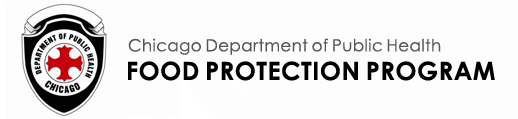
<style>
.page{position:relative;width:518px;height:119px;background:#fdfdfd}
.page>*{position:absolute;margin:0}
.t1{font:16.7px "CenturyGothic";letter-spacing:-0.06em;color:#565656}
.t2{font:25px "CenturyGothic-Bold";letter-spacing:-0.06em;color:#000000}
</style>
<div class="page">
<p class="t1" style="left:128px;top:38px;width:313px;height:17px">Chicago Department of Public Health</p>
<p class="t2" style="left:128px;top:61px;width:367px;height:20px">FOOD PROTECTION PROGRAM</p>
</div>
